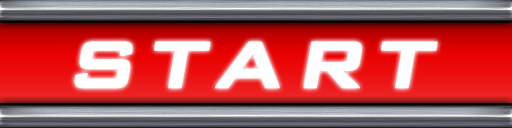
<style>
.page{position:relative;width:512px;height:128px}
.page>*{position:absolute;margin:0}
.t1{font:88px "BankGothicBT-Medium";letter-spacing:0.1em;color:#ffffff;font-weight:bold;font-style:italic}
</style>
<div class="page">
<p class="t1" style="left:74px;top:41px;width:364px;height:48px">START</p>
</div>
